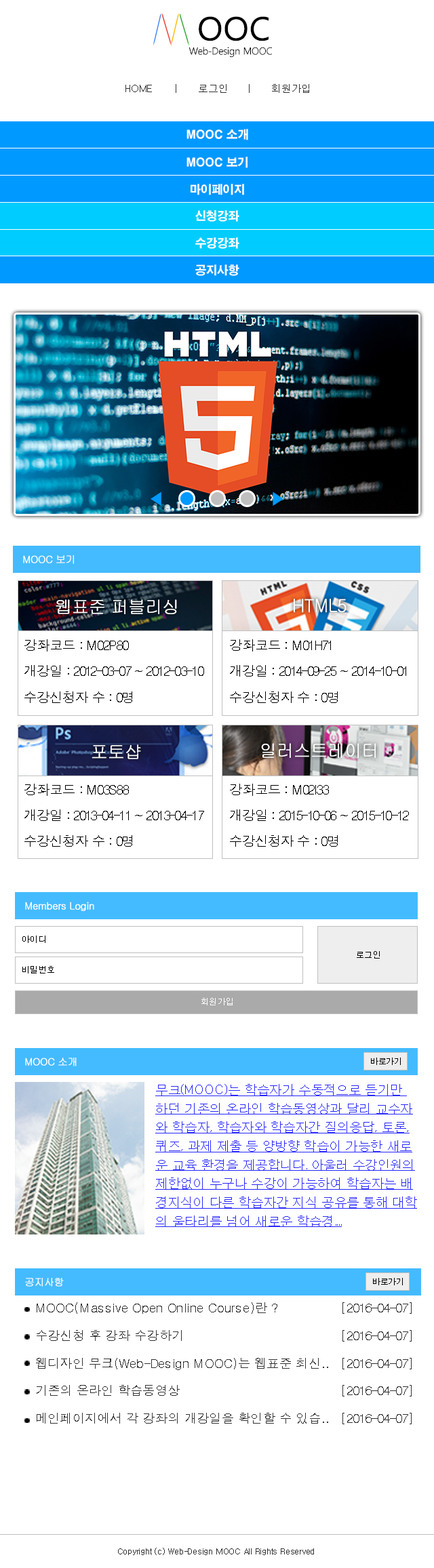
<style>
.page{position:relative;width:434px;height:1568px;background:#ffffff}
.page>*{position:absolute;margin:0}
.t1{font:32.4px "MalgunGothicRegular";color:#000000;font-weight:bold}
.t2{font:10px "MalgunGothicRegular";letter-spacing:-0.04em;color:#000000}
.t3{font:10.2px "Dotum";letter-spacing:-0.02em;color:#333333}
.t4{font:11.5px "H2gtrE";letter-spacing:-0.02em;color:#ffffff}
.t5{font:10.2px "Gulim";letter-spacing:-0.04em;color:#ffffff;font-weight:bold}
.t6{font:17.7px "Gulim";letter-spacing:-0.04em;color:#ffffff;font-weight:bold}
.t7{font:13.5px/26px "Dotum";letter-spacing:-0.04em;color:#000000}
.t8{font:8.8px "Dotum";letter-spacing:-0.04em;color:#000000}
.t9{font:8.8px "Dotum";letter-spacing:-0.04em;color:#ffffff}
.t10{font:8.1px "Dotum";letter-spacing:-0.04em;color:#000000}
.t11{font:12.9px/18.8px "Dotum";letter-spacing:-0.04em;color:#2727ff;text-decoration:underline}
.t12{font:12.7px/27.5px "Dotum";letter-spacing:-0.02em;color:#333333}
.t13{font:8.1px "Dotum";letter-spacing:-0.02em;color:#333333}
</style>
<div class="page">
<p class="t1" style="left:199px;top:16px;width:69px;height:25px">OOC</p>
<p class="t2" style="left:188px;top:47px;width:84px;height:11px">Web-Design MOOC</p>
<p class="t3" style="left:125px;top:84px;width:184px;height:9px">HOME | 로그인 | 회원가입</p>
<p class="t4" style="left:186px;top:129px;width:62px;height:11px">MOOC 소개</p>
<p class="t4" style="left:186px;top:157px;width:62px;height:11px">MOOC 보기</p>
<p class="t4" style="left:190px;top:184px;width:54px;height:11px">마이페이지</p>
<p class="t4" style="left:195px;top:210px;width:44px;height:12px">신청강좌</p>
<p class="t4" style="left:195px;top:237px;width:44px;height:12px">수강강좌</p>
<p class="t4" style="left:195px;top:264px;width:44px;height:12px">공지사항</p>
<p class="t5" style="left:23px;top:555px;width:51px;height:9px">MOOC 보기</p>
<p class="t6" style="left:56px;top:599px;width:121px;height:15px">웹표준 퍼블리싱</p>
<p class="t6" style="left:294px;top:599px;width:52px;height:14px">HTML5</p>
<p class="t7" style="left:24px;top:639px;width:180px;height:64px">강좌코드 : M02P80<br>개강일 : 2012-03-07 ~ 2012-03-10<br>수강신청자 수 : 0명</p>
<p class="t7" style="left:230px;top:639px;width:176px;height:64px">강좌코드 : M01H71<br>개강일 : 2014-09-25 ~ 2014-10-01<br>수강신청자 수 : 0명</p>
<p class="t6" style="left:92px;top:744px;width:49px;height:15px">포토샵</p>
<p class="t6" style="left:261px;top:743px;width:115px;height:15px">일러스트레이터</p>
<p class="t7" style="left:24px;top:784px;width:180px;height:63px">강좌코드 : M03S88<br>개강일 : 2013-04-11 ~ 2013-04-17<br>수강신청자 수 : 0명</p>
<p class="t7" style="left:230px;top:784px;width:179px;height:63px">강좌코드 : M02I33<br>개강일 : 2015-10-06 ~ 2015-10-12<br>수강신청자 수 : 0명</p>
<p class="t5" style="left:25px;top:902px;width:69px;height:9px">Members Login</p>
<p class="t8" style="left:22px;top:936px;width:23px;height:7px">아이디</p>
<p class="t8" style="left:357px;top:951px;width:23px;height:8px">로그인</p>
<p class="t8" style="left:22px;top:966px;width:32px;height:7px">비밀번호</p>
<p class="t9" style="left:201px;top:998px;width:32px;height:7px">회원가입</p>
<p class="t5" style="left:25px;top:1058px;width:52px;height:8px">MOOC 소개</p>
<p class="t10" style="left:371px;top:1058px;width:30px;height:7px">바로가기</p>
<p class="t11" style="left:155px;top:1084px;width:262px;height:143px">무크(MOOC)는 학습자가 수동적으로 듣기만 <br>하던 기존의 온라인 학습동영상과 달리 교수자<br>와 학습자, 학습자와 학습자간 질의응답, 토론,<br>퀴즈, 과제 제출 등 양방향 학습이 가능한 새로<br>운 교육 환경을 제공합니다. 아울러 수강인원의<br>제한없이 누구나 수강이 가능하여 학습자는 배<br>경지식이 다른 학습자간 지식 공유를 통해 대학<br>의 울타리를 넘어 새로운 학습경....</p>
<p class="t5" style="left:25px;top:1278px;width:39px;height:9px">공지사항</p>
<p class="t10" style="left:373px;top:1278px;width:30px;height:7px">바로가기</p>
<p class="t12" style="left:36px;top:1302px;width:375px;height:122px">MOOC(Massive Open Online Course)란 ?  [2016-04-07]<br>수강신청 후 강좌 수강하기     [2016-04-07]<br>웹디자인 무크(Web-Design MOOC)는 웹표준 최신.. [2016-04-07]<br>기존의 온라인 학습동영상     [2016-04-07]<br>메인페이지에서 각 강좌의 개강일을 확인할 수 있습.. [2016-04-07]</p>
<p class="t13" style="left:118px;top:1548px;width:196px;height:7px">Copyright (c) Web-Design MOOC All Rights Reserved</p>
</div>
